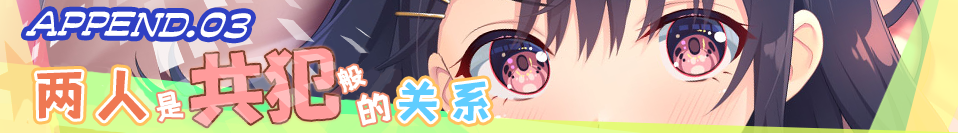
<style>
.page{position:relative;width:958px;height:133px}
.page>*{position:absolute;margin:0}
.t1{font:26.9px "shetumodengxiaofangti";letter-spacing:0.16em;color:#ffffff;text-transform:uppercase;font-weight:bold}
.t2{font:56.9px "shetumodengxiaofangti";letter-spacing:0.08em;color:#ef7853;text-transform:uppercase;font-weight:bold}
.t3{font:44.3px "shetumodengxiaofangti";letter-spacing:0.16em;color:#60cdff;text-transform:uppercase;font-weight:bold}
.t4{font:31px "shetumodengxiaofangti";letter-spacing:0.16em;color:#ffffff;text-transform:uppercase;font-weight:bold}
.t5{font:35.4px "shetumodengxiaofangti";letter-spacing:0.16em;color:#ffffff;text-transform:uppercase;font-weight:bold}
</style>
<div class="page">
<p class="t1" style="left:337px;top:65px;width:29px;height:28px;rotate:-24deg">般</p>
<p class="t2" style="left:37px;top:70px;width:110px;height:51px">两人</p>
<p class="t3" style="left:399px;top:81px;width:90px;height:41px;rotate:1deg">关系</p>
<p class="t4" style="left:156px;top:91px;width:28px;height:31px;rotate:-12deg">是</p>
<p class="t5" style="left:357px;top:93px;width:34px;height:33px;rotate:-14deg">的</p>
</div>
